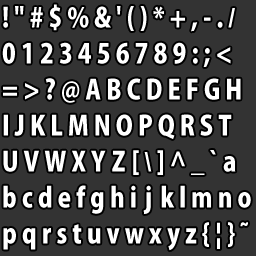
<style>
.page{position:relative;width:256px;height:256px;background:#333333}
.page>*{position:absolute;margin:0}
.t1{font:27px/36px "KozGoPro-Heavy";letter-spacing:0.19em;color:#ffffff;scale:0.88 1}
.t2{font:27px/36px "Arial-BoldMT";letter-spacing:0.19em;color:#ffffff;scale:0.88 1}
.t3{font:27px/36px "KozGoPro-Heavy";letter-spacing:0.24em;color:#ffffff;scale:0.88 1}
.t4{font:27px/36px "KozGoPro-Heavy";letter-spacing:0.3em;color:#ffffff;scale:0.88 1}
</style>
<div class="page">
<p class="t1" style="left:2px;top:4px;width:249px;height:247px">!"#$%&amp;'()*+,-.<span class="t2">/<br></span>0123456789:;&lt;<br>=&gt;?@ABCDEFGH<br>IJKLMNOPQRST<br>UVWX<span class="t3">YZ</span>[<span class="t2">\</span>]^_`a<br>bcdefgh<span class="t4">ij</span>klmno<br>pqrstuvwxyz{|}~</p>
</div>
